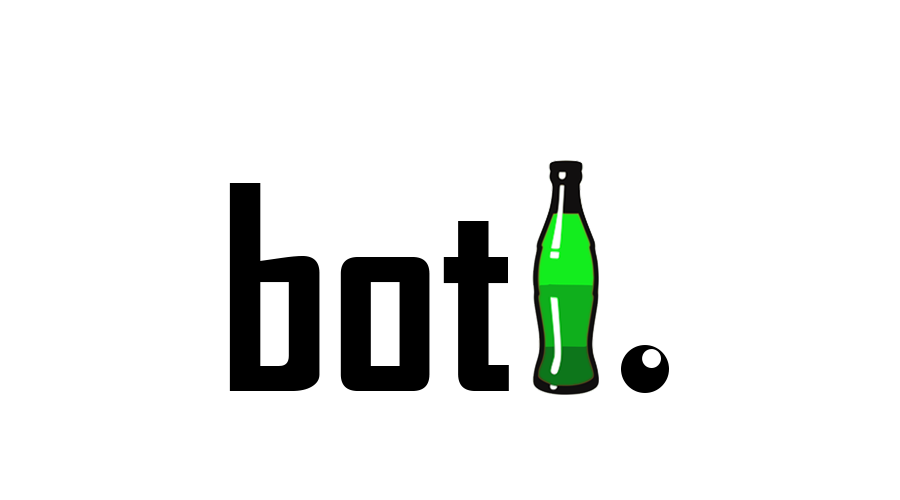
<style>
.page{position:relative;width:900px;height:500px;background:#ffffff}
.page>*{position:absolute;margin:0}
.t1{font:272px "AgencyFB-Bold";color:#000000}
</style>
<div class="page">
<p class="t1" style="left:229px;top:183px;width:280px;height:208px">bot</p>
</div>
